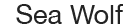
<style>
.page{position:relative;width:140px;height:28px;background:#ffffff}
.page>*{position:absolute;margin:0}
.t1{font:27.2px "HelveticaNeue";color:#242424}
</style>
<div class="page">
<p class="t1" style="left:16px;top:4px;width:107px;height:20px">Sea Wolf</p>
</div>
